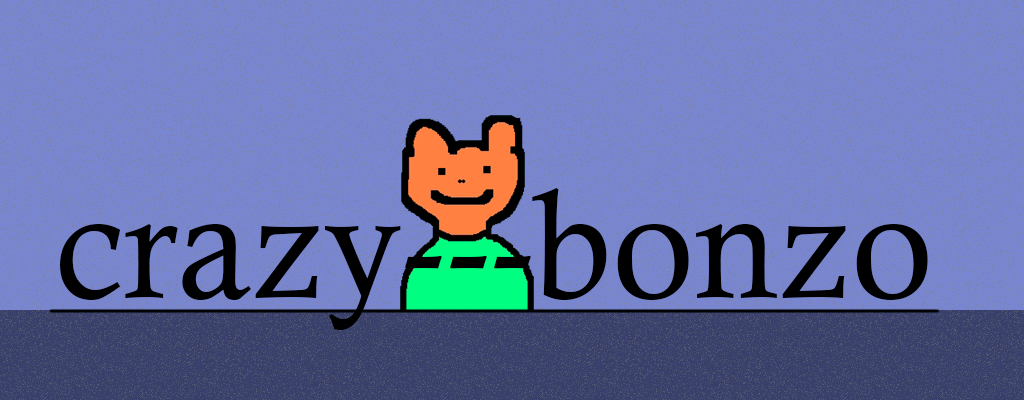
<style>
.page{position:relative;width:1024px;height:400px;background:#7987d3}
.page>*{position:absolute;margin:0}
.t1{font:152px "CalistoMT";color:#000000}
</style>
<div class="page">
<p class="t1" style="left:60px;top:188px;width:868px;height:142px">crazy---bonzo</p>
</div>
